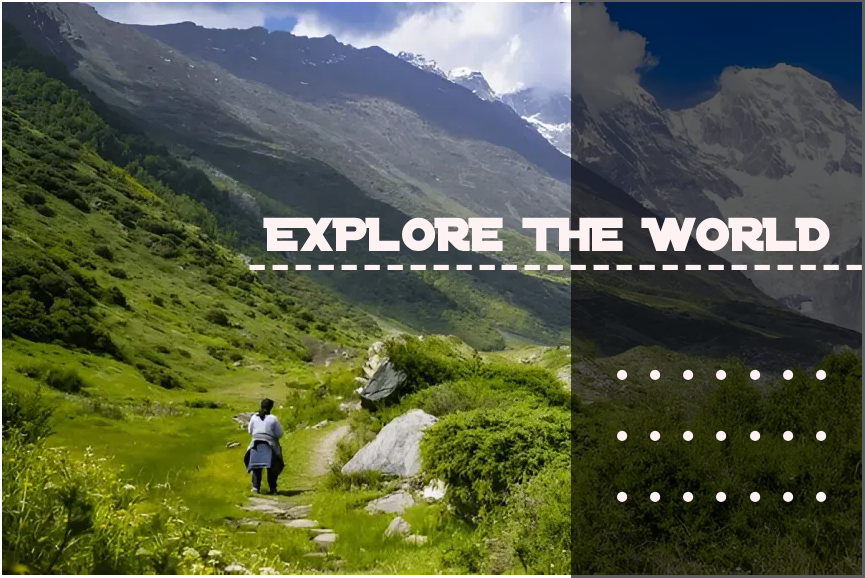
<style>
.page{position:relative;width:865px;height:578px}
.page>*{position:absolute;margin:0}
.t1{font:51px "DistantGalaxy";color:#fff2f2}
</style>
<div class="page">
<p class="t1" style="left:263px;top:217px;width:567px;height:34px">EXPLORE THE WORLD</p>
<p class="t1" style="left:617px;top:369px;width:210px;height:133px">. . . . . . .<br>. . . . . . .<br>. . . . . . .</p>
</div>
